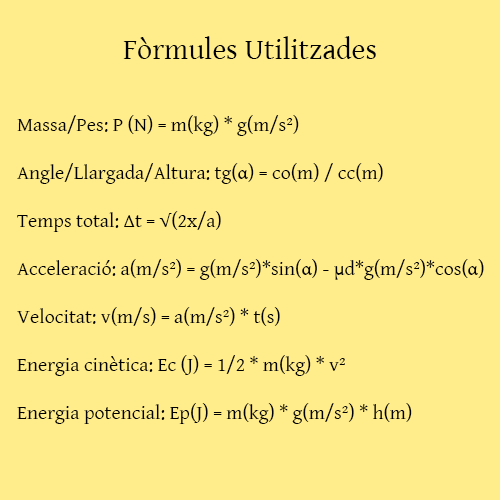
<style>
.page{position:relative;width:500px;height:500px;background:#ffec8b}
.page>*{position:absolute;margin:0}
.t1{font:30px "GentiumBasic";color:#000000}
.t2{font:20px "GentiumBasic";color:#000000}
.t3{font:20px "MinionPro-Regular";color:#000000}
</style>
<div class="page">
<p class="t1" style="left:123px;top:36px;width:253px;height:23px">Fòrmules Utilitzades</p>
<p class="t2" style="left:17px;top:115px;width:467px;height:309px">Massa/Pes: P (N) = m(kg) * g(m/s²)<br><br>Angle/Llargada/Altura: tg(<span class="t3">α</span>) = co(m) / cc(m)<br><br>Temps total: Δt = √(2x/a)<br><br>Acceleració: a(m/s²) = g(m/s²)*sin(<span class="t3">α</span>) - μd*g(m/s²)*cos(<span class="t3">α</span>)<br><br>Velocitat: v(m/s) = a(m/s²) * t(s)<br><br>Energia cinètica: Ec (J) = 1/2 * m(kg) * v²<br><br>Energia potencial: Ep(J) = m(kg) * g(m/s²) * h(m)</p>
</div>
